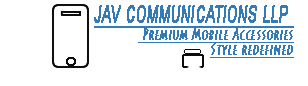
<style>
.page{position:relative;width:308px;height:86px;background:#ffffff}
.page>*{position:absolute;margin:0}
.t1{font:41.5px "ArialMT";color:#337ab7;font-variant:small-caps;font-weight:bold;font-style:italic;text-decoration:underline;scale:0.52 1}
.t2{font:27px "LithosPro-Regular";color:#337ab7;font-variant:small-caps;font-weight:bold;font-style:italic;text-decoration:underline;scale:0.52 1}
</style>
<div class="page">
<p class="t1" style="left:94px;top:5px;width:200px;height:23px">JAV COMMUNICATIONS LLP</p>
<p class="t2" style="left:138px;top:28px;width:156px;height:15px">Premium Mobile Accessories</p>
<p class="t2" style="left:210px;top:43px;width:84px;height:15px">Style redefined</p>
</div>
